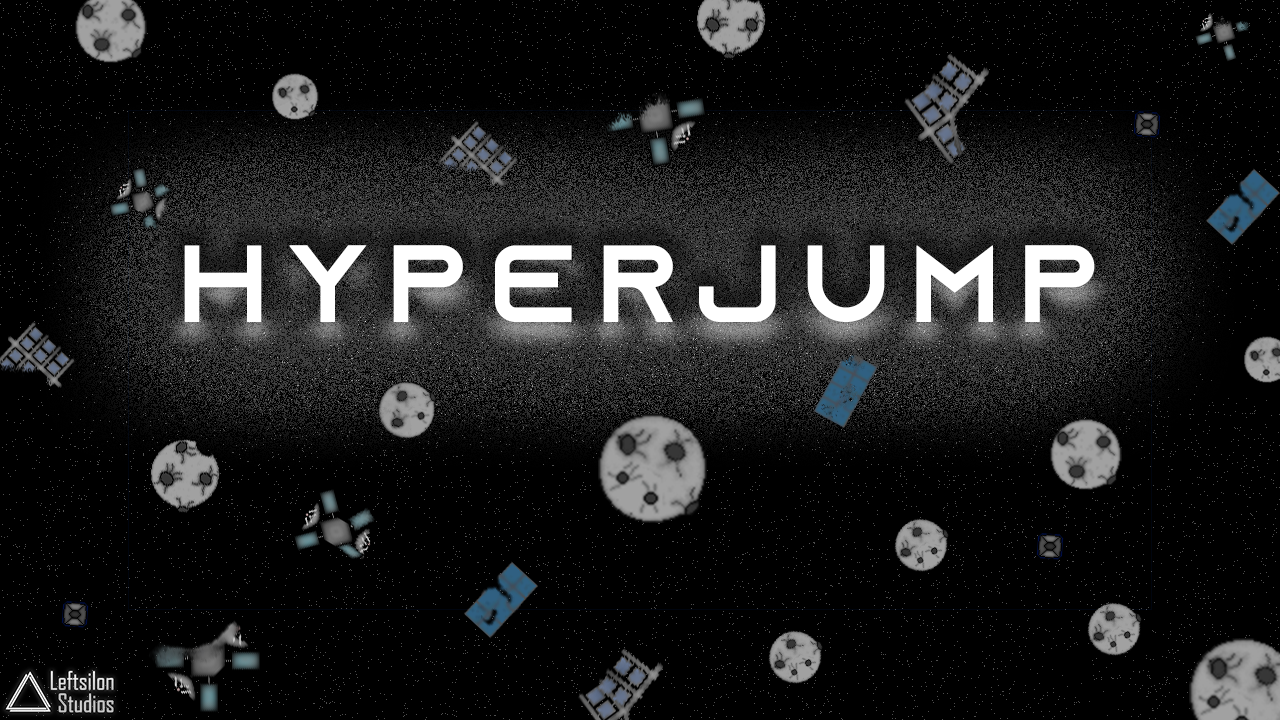
<style>
.page{position:relative;width:1280px;height:720px;background:#000000}
.page>*{position:absolute;margin:0}
.t1{font:108px "AzonixRegular";letter-spacing:0.18em;color:#ffffff;text-transform:uppercase;font-weight:bold}
</style>
<div class="page">
<p class="t1" style="left:184px;top:245px;width:911px;height:77px">hyperjump</p>
</div>
